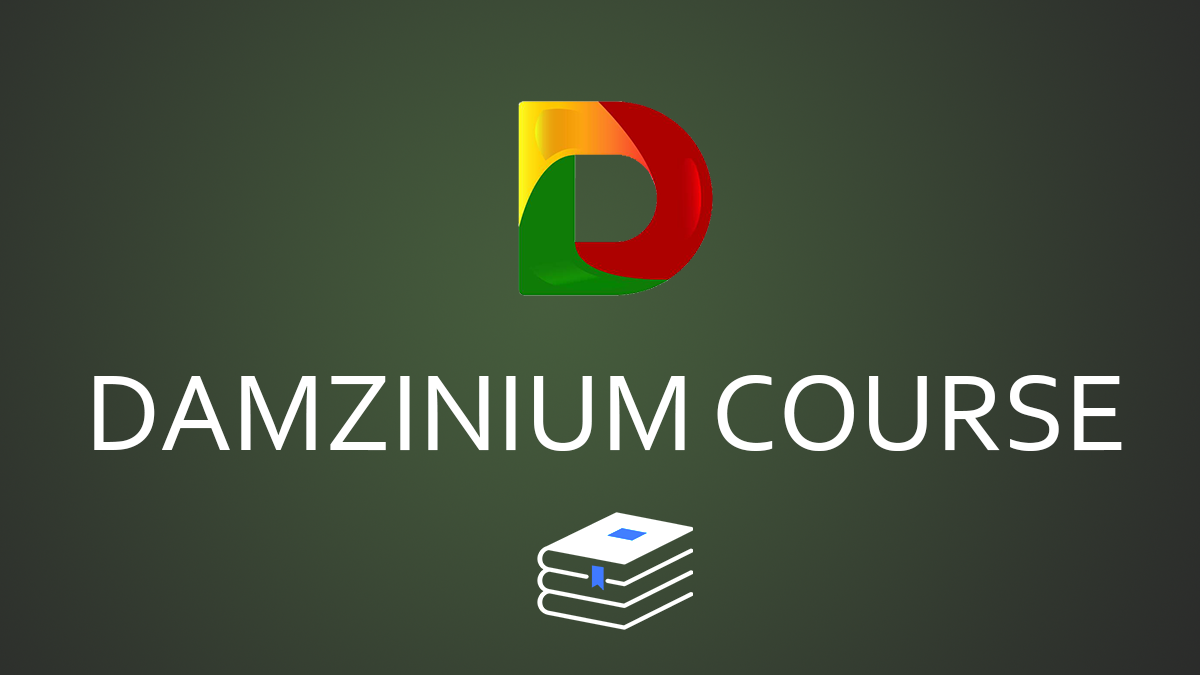
<style>
.page{position:relative;width:1200px;height:675px}
.page>*{position:absolute;margin:0}
.t1{font:112.8px "Corbel";color:#ffffff}
</style>
<div class="page">
<p class="t1" style="left:94px;top:375px;width:1028px;height:76px">DAMZINIUM COURSE</p>
</div>
